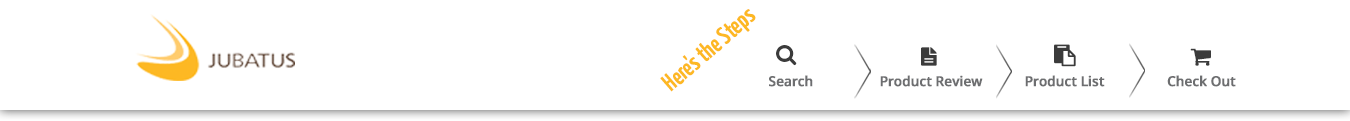
<style>
.page{position:relative;width:1350px;height:121px;background:#ffffff}
.page>*{position:absolute;margin:0}
.t1{font:25px "YanoneKaffeesatz-Bold";color:#fdb823}
.t2{font:13.8px "OpenSans-Semibold";letter-spacing:-0.02em;color:#6d6e70;font-weight:bold}
</style>
<div class="page">
<p class="t1" style="left:660px;top:9px;width:96px;height:83px;rotate:-41deg">Here's the Steps</p>
<p class="t2" style="left:769px;top:75px;width:44px;height:12px">Search</p>
<p class="t2" style="left:880px;top:75px;width:103px;height:12px">Product Review</p>
<p class="t2" style="left:1025px;top:75px;width:80px;height:12px">Product List</p>
<p class="t2" style="left:1167px;top:75px;width:69px;height:12px">Check Out</p>
</div>
